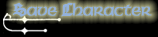
<style>
.page{position:relative;width:158px;height:37px;background:#000000}
.page>*{position:absolute;margin:0}
.t1{font:18px "Celtic-CondensedNormal";color:#94b2da}
.t2{font:18px "CathedralExtendedNormal";color:#94b2da}
</style>
<div class="page">
<p class="t1" style="left:12px;top:2px;width:140px;height:15px"><span class="t2">S</span>ave <span class="t2">C</span>haracter</p>
</div>
